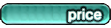
<style>
.page{position:relative;width:111px;height:28px;background:#ffffff}
.page>*{position:absolute;margin:0}
.t1{font:14px "FutoGoB101Pr5-Bold";color:#fffffa;font-weight:bold}
</style>
<div class="page">
<p class="t1" style="left:68px;top:8px;width:34px;height:14px">price</p>
</div>
